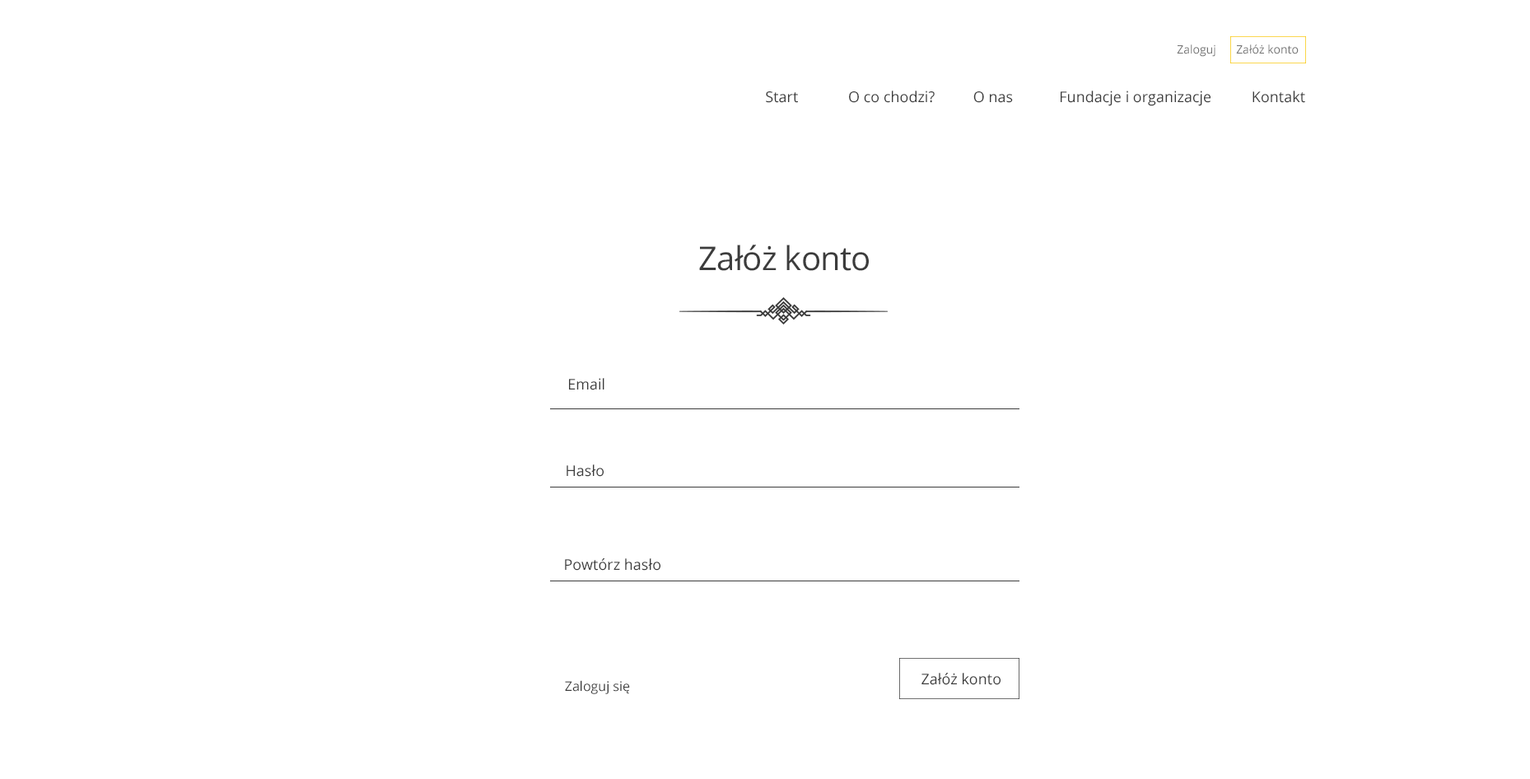
<style>
.page{position:relative;width:1530px;height:779px;background:#ffffff}
.page>*{position:absolute;margin:0}
.t1{font:11.5px "OpenSans";color:#737373}
.t2{font:14.8px "OpenSans";color:#3c3c3c}
.t3{font:32.9px "OpenSans";letter-spacing:-0.02em;color:#3c3c3c}
.t4{font:13.2px "OpenSans";color:#3c3c3c}
</style>
<div class="page">
<p class="t1" style="left:1177px;top:44px;width:122px;height:13px">Zaloguj       Załóż konto</p>
<p class="t2" style="left:766px;top:91px;width:540px;height:15px">Start             O co chodzi?          O nas            Fundacje i organizacje  Kontakt</p>
<p class="t3" style="left:699px;top:245px;width:170px;height:26px">Załóż konto</p>
<p class="t2" style="left:569px;top:378px;width:36px;height:12px">Email</p>
<p class="t2" style="left:567px;top:465px;width:37px;height:12px">Hasło</p>
<p class="t2" style="left:565px;top:558px;width:96px;height:13px">Powtórz hasło</p>
<p class="t2" style="left:922px;top:673px;width:79px;height:12px">Załóż konto</p>
<p class="t4" style="left:565px;top:680px;width:65px;height:14px">Zaloguj się</p>
</div>
